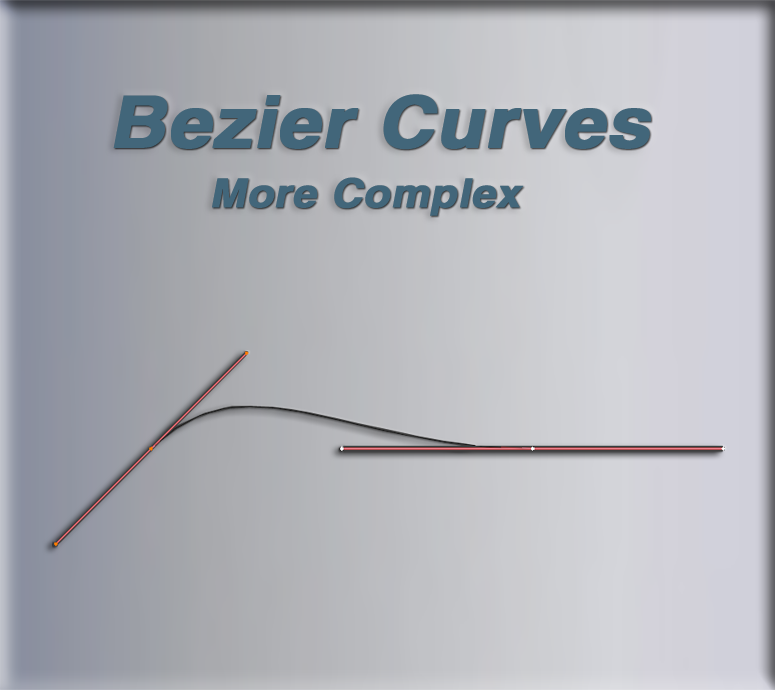
<style>
.page{position:relative;width:775px;height:690px}
.page>*{position:absolute;margin:0}
.t1{font:71.6px "HelveticaLTStd-Bold";color:#42667a;font-weight:bold;font-style:italic;scale:1.08 1}
.t2{font:40px "HelveticaLTStd-Bold";color:#42667a;font-weight:bold;font-style:italic;scale:1.08 1}
</style>
<div class="page">
<p class="t1" style="left:113px;top:94px;width:538px;height:56px">Bezier Curves</p>
<p class="t2" style="left:212px;top:177px;width:312px;height:39px">More Complex</p>
</div>
